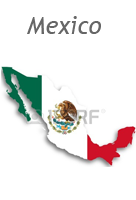
<style>
.page{position:relative;width:136px;height:200px;background:#ffffff}
.page>*{position:absolute;margin:0}
.t1{font:24px "TrebuchetMS-Italic";color:#666666}
</style>
<div class="page">
<p class="t1" style="left:27px;top:16px;width:74px;height:18px">Mexico</p>
</div>
